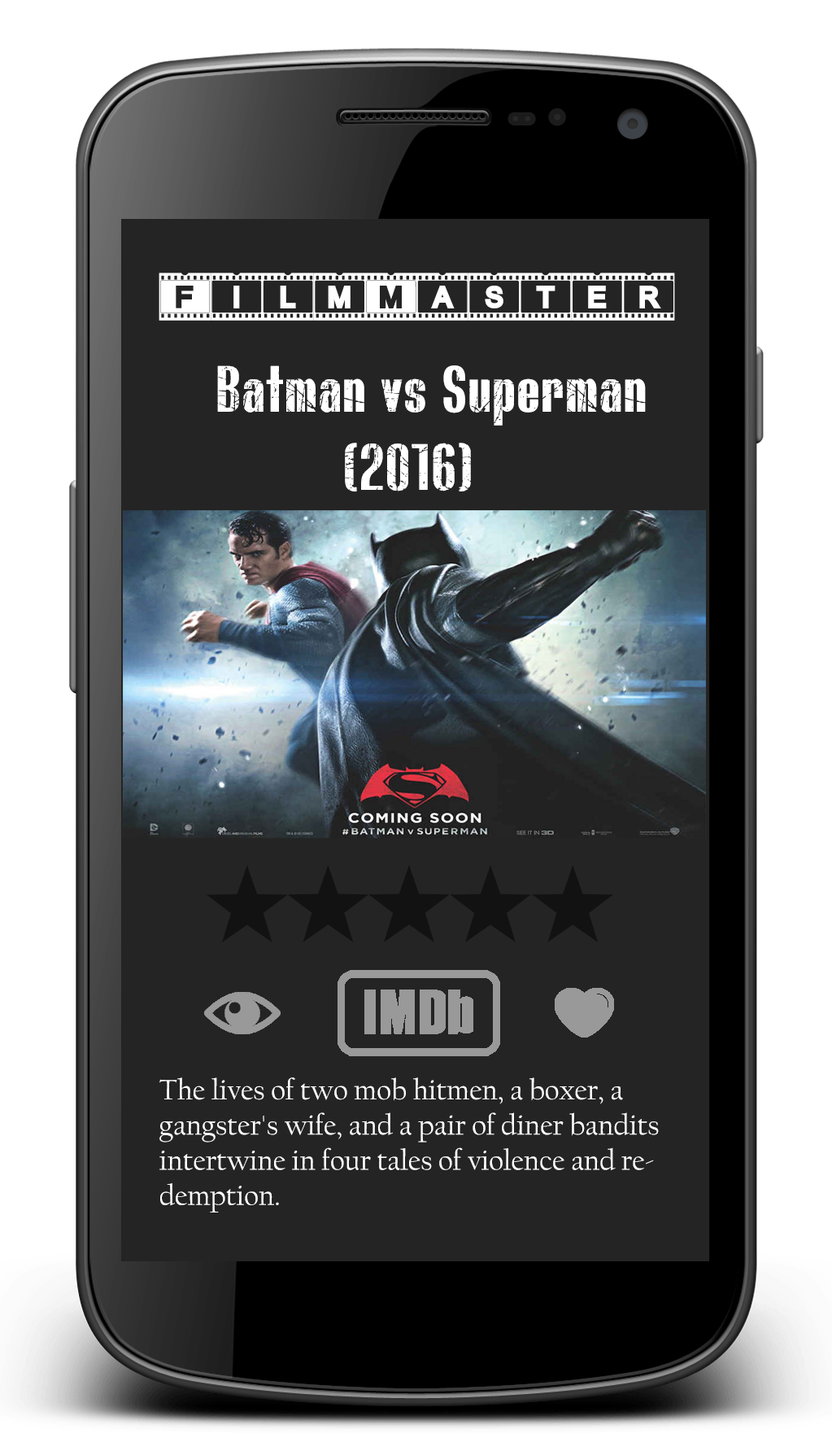
<style>
.page{position:relative;width:832px;height:1433px;background:#242424}
.page>*{position:absolute;margin:0}
.t1{font:65.1px "ACFilmstrip";color:#ffffff}
.t2{font:65.1px "BLUEFISHSCRATCHEDDemo";color:#ffffff}
.t3{font:29.3px "CalifornianFB-Reg";color:#ffffff}
</style>
<div class="page">
<p class="t1" style="left:159px;top:273px;width:516px;height:48px">FilmMaster</p>
<p class="t2" style="left:217px;top:365px;width:429px;height:126px">Batman vs Superman            (2016)</p>
<p class="t3" style="left:159px;top:1077px;width:500px;height:135px">The lives of two mob hitmen, a boxer, a gangster's wife, and a pair of diner bandits intertwine in four tales of violence and redemption.</p>
</div>
